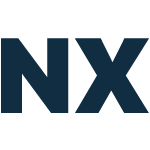
<style>
.page{position:relative;width:150px;height:150px;background:#ffffff}
.page>*{position:absolute;margin:0}
.t1{font:105.9px "SFUIDisplay-Black";color:#102d42}
</style>
<div class="page">
<p class="t1" style="left:1px;top:38px;width:148px;height:75px">NX</p>
</div>
